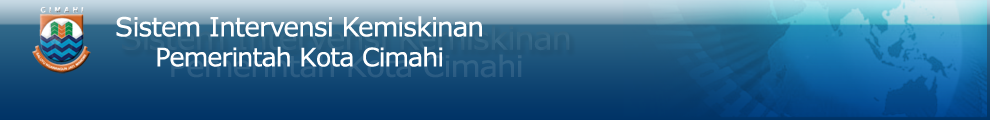
<style>
.page{position:relative;width:990px;height:120px}
.page>*{position:absolute;margin:0}
.t1{font:26.4px "Verdana";letter-spacing:-0.04em;color:#ffffff}
.t2{font:25.4px "Verdana";letter-spacing:-0.04em;color:#ffffff}
</style>
<div class="page">
<p class="t1" style="left:116px;top:16px;width:366px;height:21px">Sistem Intervensi Kemiskinan</p>
<p class="t2" style="left:157px;top:46px;width:286px;height:21px">Pemerintah Kota Cimahi</p>
</div>
